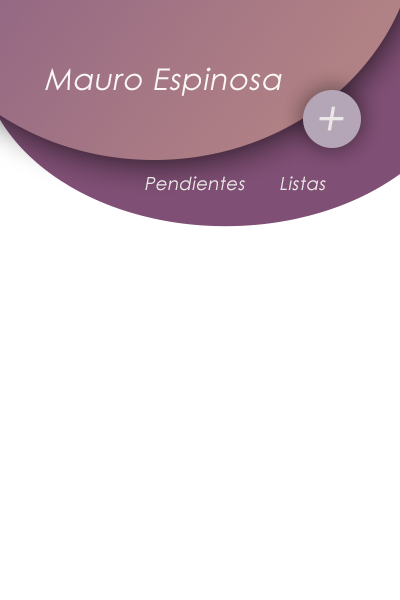
<style>
.page{position:relative;width:400px;height:600px;background:#ffffff}
.page>*{position:absolute;margin:0}
.t1{font:30px "CenturyGothic";letter-spacing:0.025em;color:#fbf7f7;font-style:italic}
.t2{font:48px "CenturyGothic";letter-spacing:0.025em;color:#ece7e7;font-style:italic}
.t3{font:18px "CenturyGothic";letter-spacing:0.025em;color:#ece7e7;font-style:italic}
</style>
<div class="page">
<p class="t1" style="left:45px;top:67px;width:237px;height:29px">Mauro Espinosa</p>
<p class="t2" style="left:319px;top:106px;width:25px;height:25px">+</p>
<p class="t3" style="left:145px;top:176px;width:100px;height:15px">Pendientes</p>
<p class="t3" style="left:280px;top:176px;width:46px;height:15px">Listas</p>
</div>
